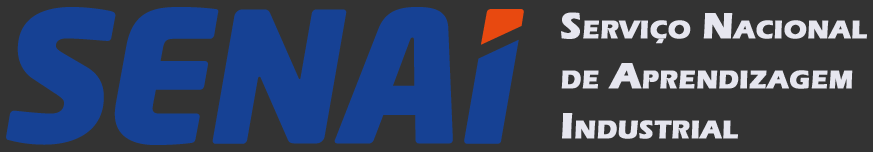
<style>
.page{position:relative;width:873px;height:152px;background:#333333}
.page>*{position:absolute;margin:0}
.t1{font:37.5px/50px "ErasITC-Bold";color:#e6e6ef;font-variant:small-caps;font-weight:bold}
</style>
<div class="page">
<p class="t1" style="left:561px;top:12px;width:306px;height:127px">Serviço Nacional<br>de Aprendizagem<br>Industrial</p>
</div>
